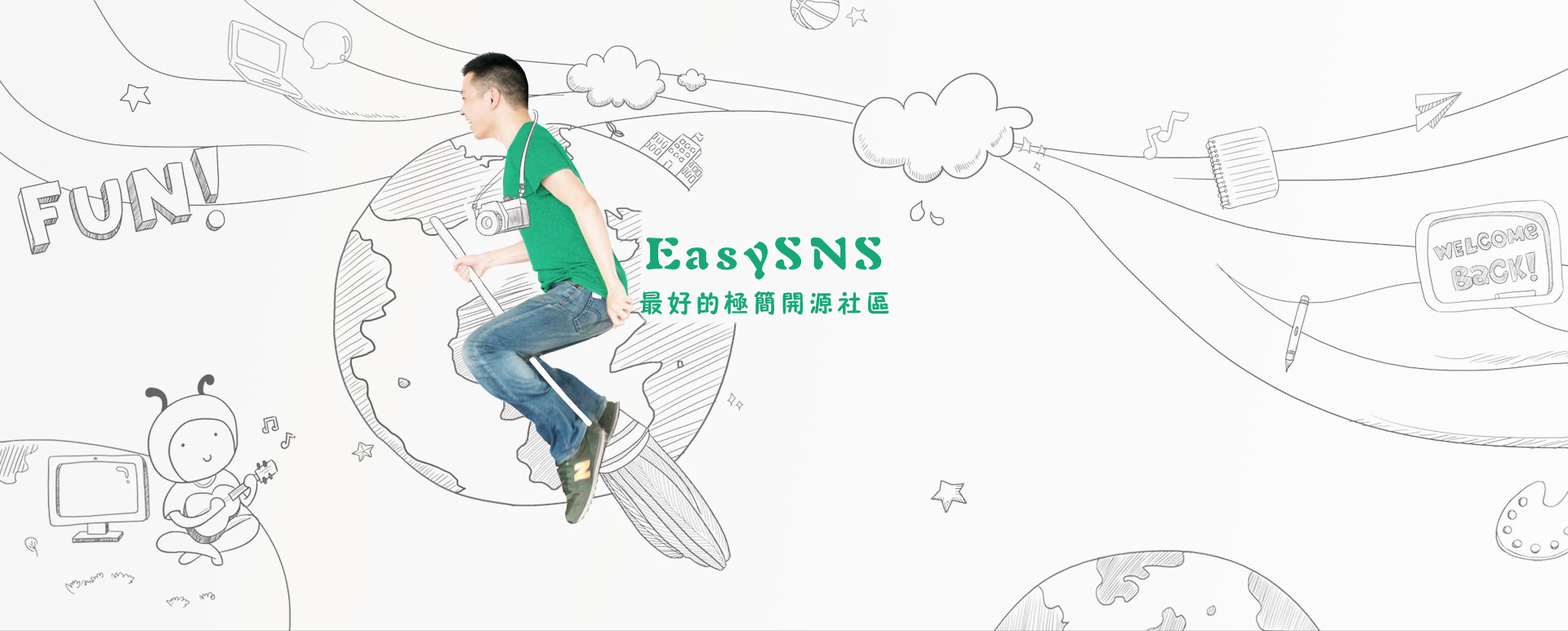
<style>
.page{position:relative;width:1568px;height:631px;background:#fafafa}
.page>*{position:absolute;margin:0}
.t1{font:44.9px "FZSHHJW--GB1-0";letter-spacing:0.12em;color:#18a875}
.t2{font:25.3px "FZSEFW--GB1-0";letter-spacing:0.12em;color:#18a875}
</style>
<div class="page">
<p class="t1" style="left:646px;top:237px;width:236px;height:43px">EasySNS</p>
<p class="t2" style="left:639px;top:291px;width:250px;height:24px">最好的极简开源社区</p>
</div>
